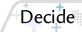
<style>
.page{position:relative;width:82px;height:32px;background:#ffffff}
.page>*{position:absolute;margin:0}
.t1{font:18.7px "Amira-Roman";color:#000000}
</style>
<div class="page">
<p class="t1" style="left:21px;top:9px;width:54px;height:15px;opacity:0.96">Decide</p>
</div>
